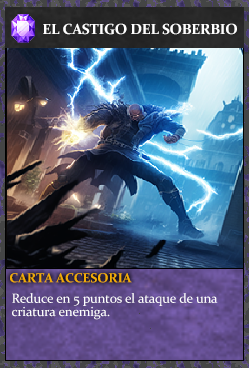
<style>
.page{position:relative;width:249px;height:368px}
.page>*{position:absolute;margin:0}
.t1{font:14.7px "Constantia-Bold";letter-spacing:-0.02em;color:#ffffff}
.t2{font:13.3px "Constantia-Bold";letter-spacing:-0.02em;color:#f2ac05}
.t3{font:13.3px/13.3px "Constantia";letter-spacing:-0.02em;color:#ffffff}
</style>
<div class="page">
<p class="t1" style="left:43px;top:23px;width:194px;height:12px">EL CASTIGO DEL SOBERBIO</p>
<p class="t2" style="left:10px;top:273px;width:122px;height:10px">CARTA ACCESORIA</p>
<p class="t3" style="left:12px;top:293px;width:206px;height:27px">Reduce en 5 puntos el ataque de una<br>criatura enemiga.</p>
</div>
